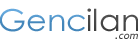
<style>
.page{position:relative;width:140px;height:45px;background:#ffffff}
.page>*{position:absolute;margin:0}
.t1{font:30.2px "LevenimMT";color:#4588bc;scale:1.06 1}
.t2{font:30.2px "LevenimMT";color:#484848;scale:1.06 1}
.t3{font:10.3px "TrebuchetMS-Italic";color:#424242;scale:1.06 1}
</style>
<div class="page">
<p class="t1" style="left:0px;top:8px;width:85px;height:24px">Genc</p>
<p class="t2" style="left:87px;top:8px;width:51px;height:24px">ilan</p>
<p class="t3" style="left:115px;top:33px;width:23px;height:6px">.com</p>
</div>
